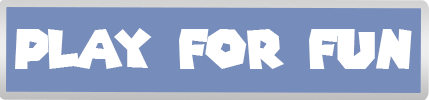
<style>
.page{position:relative;width:429px;height:100px;background:#768cbb}
.page>*{position:absolute;margin:0}
.t1{font:54px "SuperMarioGalaxy";color:#ffffff}
</style>
<div class="page">
<p class="t1" style="left:15px;top:28px;width:397px;height:41px">play for fun</p>
</div>
